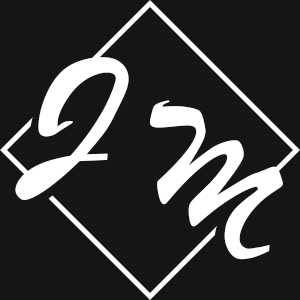
<style>
.page{position:relative;width:300px;height:300px;background:#151518}
.page>*{position:absolute;margin:0}
.t1{font:214.7px "BrushScriptMT";scale:1.16 1}
.t2{font:193.3px "BrushScriptMT";color:#ffffff;scale:1.16 1}
.t3{font:173.8px "BrushScriptMT";color:#ffffff;scale:0.95 1}
.t4{font:170.7px "BrushScriptMT";scale:0.95 1}
</style>
<div class="page">
<p class="t1" style="left:4px;top:59px;width:126px;height:159px;rotate:26deg">J</p>
<p class="t2" style="left:15px;top:57px;width:114px;height:143px;rotate:26deg">J</p>
<p class="t3" style="left:150px;top:100px;width:133px;height:160px;rotate:33deg">M</p>
<p class="t4" style="left:140px;top:106px;width:132px;height:157px;rotate:33deg">M</p>
</div>
